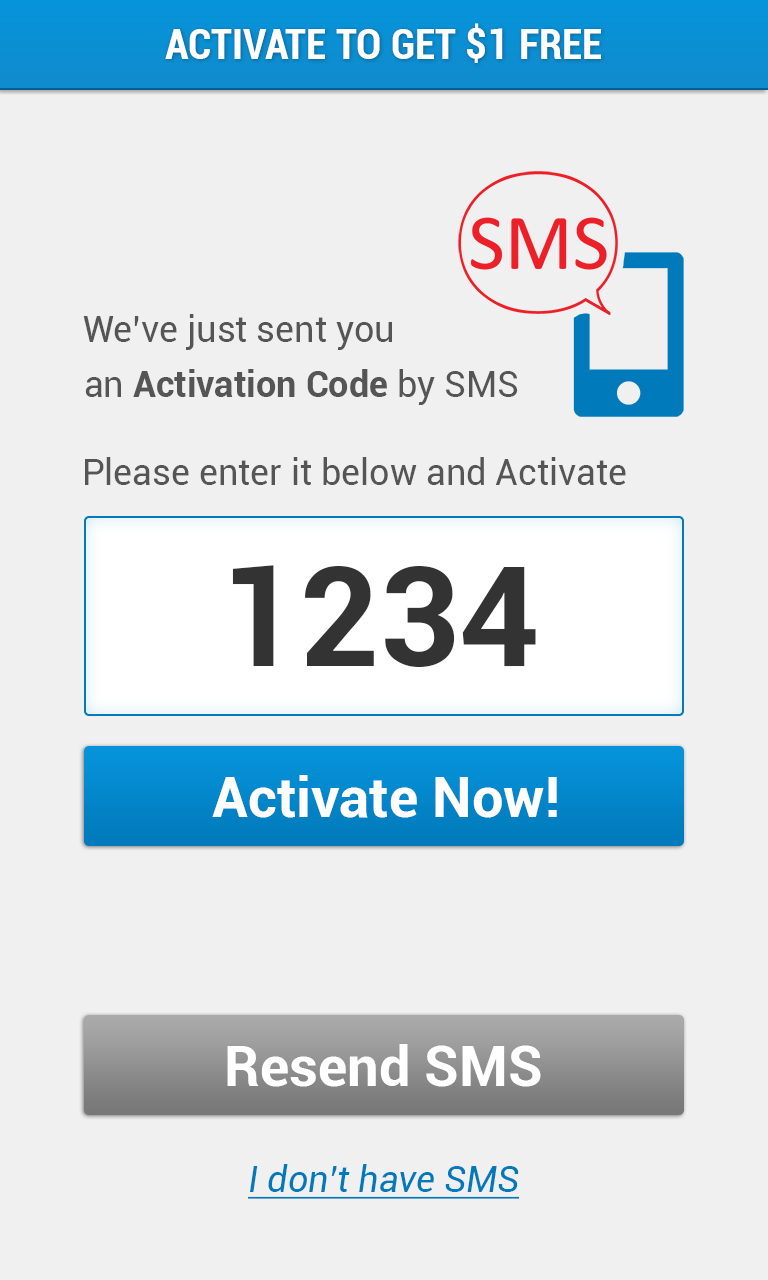
<style>
.page{position:relative;width:768px;height:1280px;background:#f0f0f0}
.page>*{position:absolute;margin:0}
.t1{font:42px "Roboto-BoldCondensed";color:#ffffff}
.t2{font:36px "Roboto-Regular";color:#555555}
.t3{font:36px "Roboto-Bold";color:#555555}
.t4{font:140px "Roboto-Bold";color:#333333}
.t5{font:56px "Roboto-Bold";color:#ffffff}
.t6{font:36px "Roboto-Italic";color:#007abb;text-decoration:underline}
</style>
<div class="page">
<p class="t1" style="left:165px;top:23px;width:436px;height:40px">ACTIVATE TO GET $1 FREE</p>
<p class="t2" style="left:83px;top:314px;width:309px;height:36px">We’ve just sent you</p>
<p class="t3" style="left:85px;top:369px;width:433px;height:36px"><span class="t2">an </span>Activation Code<span class="t2"> by SMS</span></p>
<p class="t2" style="left:85px;top:457px;width:541px;height:28px">Please enter it below and Activate</p>
<p class="t4" style="left:232px;top:565px;width:304px;height:102px">1234</p>
<p class="t5" style="left:212px;top:775px;width:345px;height:43px">Activate Now!</p>
<p class="t5" style="left:227px;top:1044px;width:314px;height:43px">Resend SMS</p>
<p class="t6" style="left:248px;top:1164px;width:272px;height:35px">I don’t have SMS</p>
</div>
